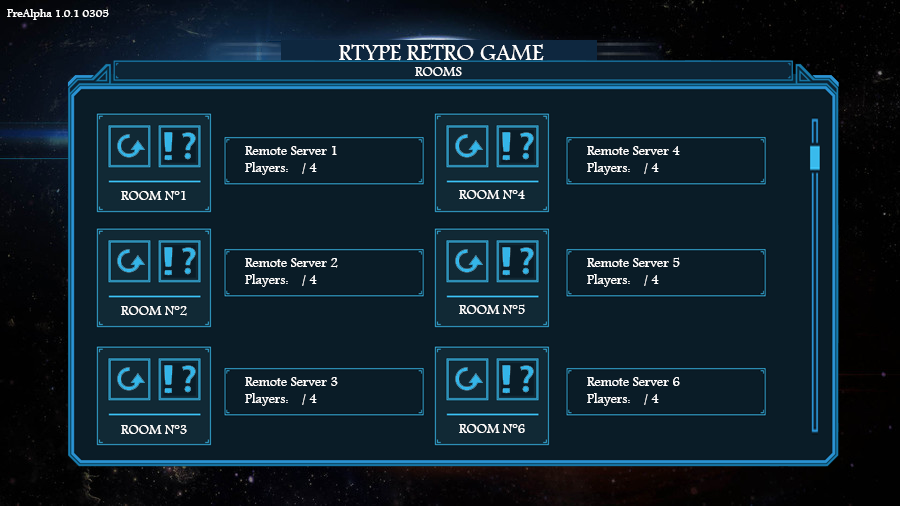
<style>
.page{position:relative;width:900px;height:506px;background:#0a1c27}
.page>*{position:absolute;margin:0}
.t1{font:12px "Andalus";color:#ffffff}
.t2{font:24px "Andalus";color:#ffffff}
.t3{font:14px "Andalus";color:#ffffff}
</style>
<div class="page">
<p class="t1" style="left:7px;top:9px;width:102px;height:11px">PreAlpha 1.0.1 0305</p>
<p class="t2" style="left:339px;top:44px;width:205px;height:17px">RTYPE RETRO GAME</p>
<p class="t3" style="left:415px;top:67px;width:47px;height:9px">ROOMS</p>
<p class="t3" style="left:245px;top:146px;width:92px;height:29px">Remote Server 1<br>Players:    / 4</p>
<p class="t3" style="left:587px;top:146px;width:93px;height:29px">Remote Server 4<br>Players:    / 4</p>
<p class="t3" style="left:121px;top:191px;width:65px;height:9px">ROOM N°1</p>
<p class="t3" style="left:459px;top:190px;width:66px;height:9px">ROOM N°4</p>
<p class="t3" style="left:587px;top:257px;width:93px;height:30px">Remote Server 5<br>Players:    / 4</p>
<p class="t3" style="left:245px;top:258px;width:93px;height:29px">Remote Server 2<br>Players:    / 4</p>
<p class="t3" style="left:459px;top:304px;width:66px;height:10px">ROOM N°5</p>
<p class="t3" style="left:121px;top:306px;width:66px;height:10px">ROOM N°2</p>
<p class="t3" style="left:245px;top:377px;width:93px;height:29px">Remote Server 3<br>Players:    / 4</p>
<p class="t3" style="left:587px;top:377px;width:93px;height:29px">Remote Server 6<br>Players:    / 4</p>
<p class="t3" style="left:121px;top:425px;width:66px;height:9px">ROOM N°3</p>
<p class="t3" style="left:459px;top:424px;width:66px;height:9px">ROOM N°6</p>
</div>
